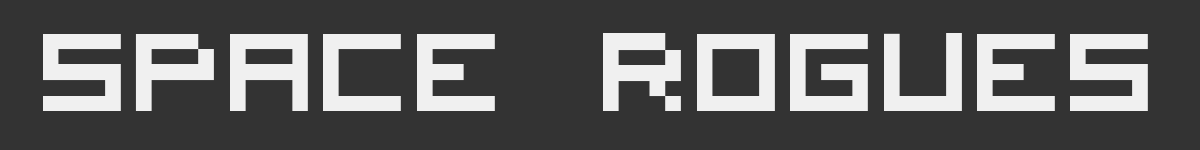
<style>
.page{position:relative;width:1200px;height:150px;background:#333333}
.page>*{position:absolute;margin:0}
.t1{font:200px "VisitorTT2BRK";color:#f0f0f0}
</style>
<div class="page">
<p class="t1" style="left:43px;top:33px;width:1105px;height:78px">SPACe ROGUEs</p>
</div>
